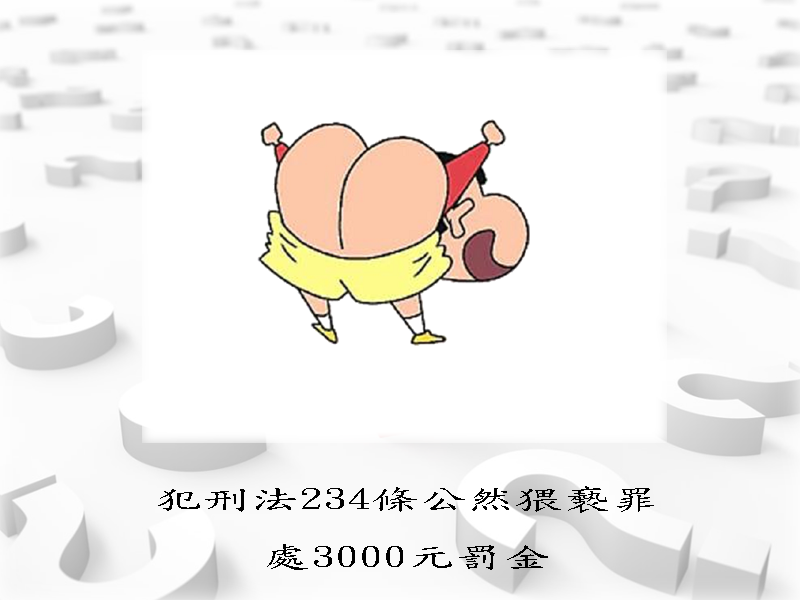
<style>
.page{position:relative;width:800px;height:600px;background:#ffffff}
.page>*{position:absolute;margin:0}
.t1{font:28.8px "DFKaiShu-SB-Estd-BF";color:#000000;scale:1.67 1}
</style>
<div class="page">
<p class="t1" style="left:158px;top:486px;width:496px;height:84px;text-align:center">犯刑法234條公然猥褻罪<br>處3000元罰金</p>
</div>
